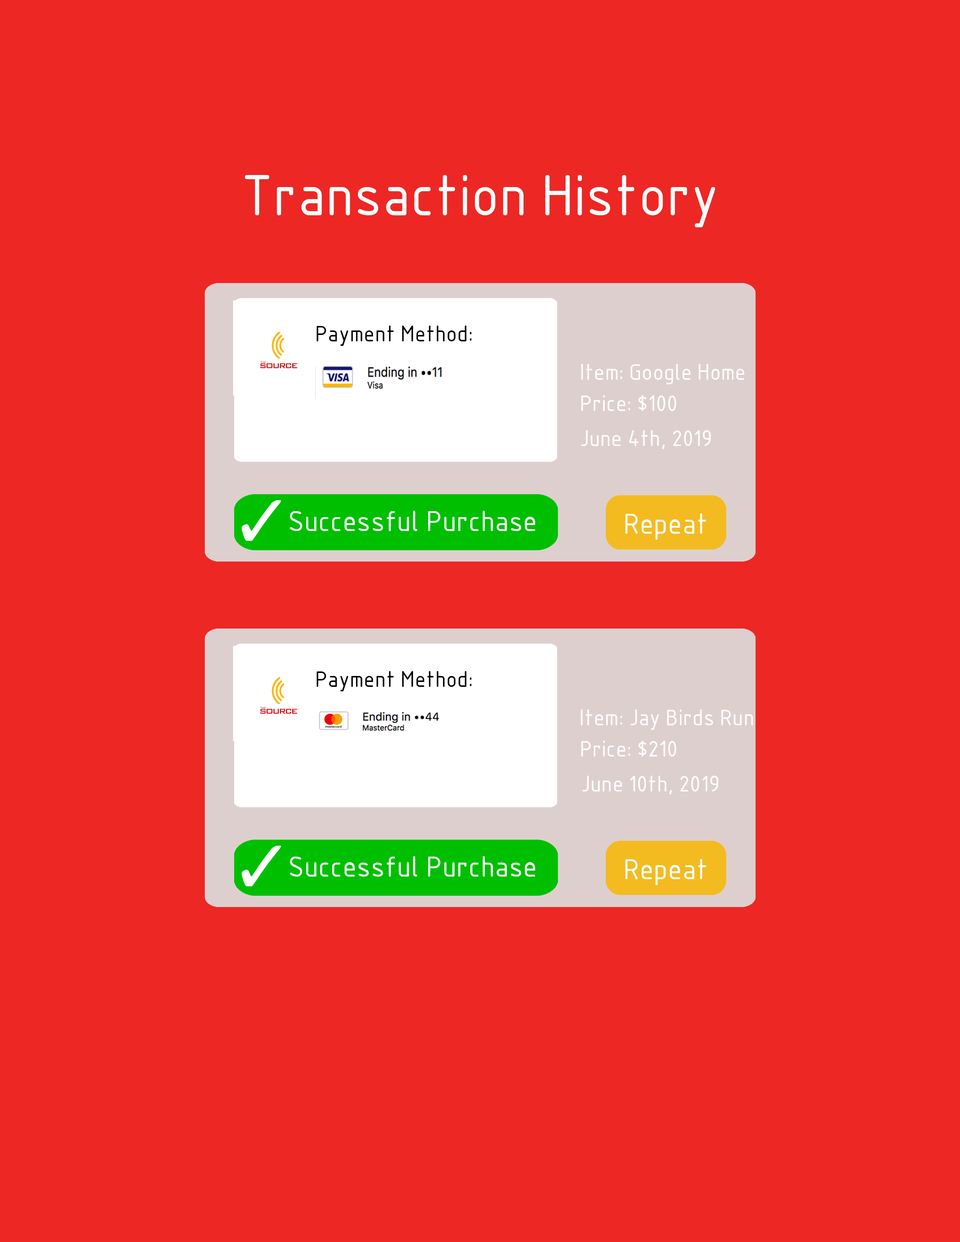
<style>
.page{position:relative;width:960px;height:1242px;background:#ed2724}
.page>*{position:absolute;margin:0}
.t1{font:56.5px "GOST-Common";color:#ffffff}
.t2{font:22px "GOST-Common";color:#000000}
.t3{font:22px "GOST-Common";color:#ffffff}
.t4{font:28.2px "GOST-Common";color:#ffffff}
</style>
<div class="page">
<p class="t1" style="left:245px;top:175px;width:470px;height:52px">Transaction History</p>
<p class="t2" style="left:317px;top:326px;width:155px;height:20px">Payment Method:</p>
<p class="t3" style="left:581px;top:364px;width:163px;height:20px">Item: Google Home</p>
<p class="t3" style="left:581px;top:395px;width:95px;height:16px">Price: $100</p>
<p class="t3" style="left:581px;top:430px;width:130px;height:19px">June 4th, 2019</p>
<p class="t4" style="left:290px;top:511px;width:245px;height:20px">Successful Purchase</p>
<p class="t4" style="left:625px;top:513px;width:81px;height:27px">Repeat</p>
<p class="t2" style="left:317px;top:671px;width:155px;height:21px">Payment Method:</p>
<p class="t3" style="left:581px;top:710px;width:172px;height:20px">Item: Jay Birds Run</p>
<p class="t3" style="left:581px;top:741px;width:95px;height:16px">Price: $210</p>
<p class="t3" style="left:582px;top:776px;width:136px;height:19px">June 10th, 2019</p>
<p class="t4" style="left:290px;top:856px;width:245px;height:21px">Successful Purchase</p>
<p class="t4" style="left:625px;top:859px;width:81px;height:26px">Repeat</p>
</div>
